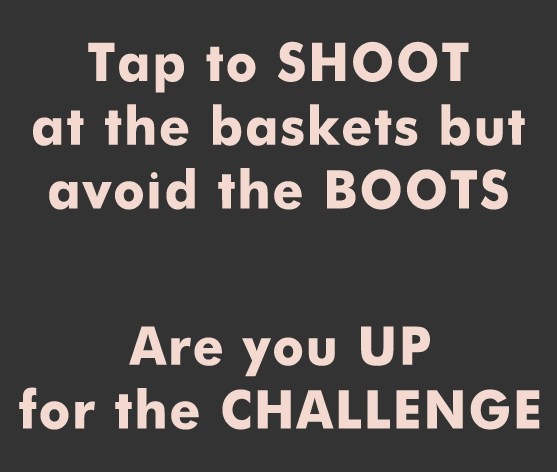
<style>
.page{position:relative;width:557px;height:472px;background:#333333}
.page>*{position:absolute;margin:0}
.t1{font:53.2px "Futura-Bold";letter-spacing:0.04em;color:#f3d9d0;scale:0.95 1}
</style>
<div class="page">
<p class="t1" style="left:33px;top:41px;width:492px;height:169px;text-align:center">Tap to SHOOT<br>at the baskets but<br>avoid the BOOTS</p>
<p class="t1" style="left:19px;top:326px;width:521px;height:104px;text-align:center">Are you UP<br>for the CHALLENGE</p>
</div>
